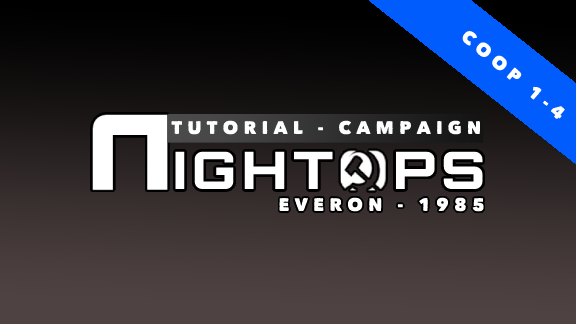
<style>
.page{position:relative;width:576px;height:324px}
.page>*{position:absolute;margin:0}
.t1{font:18.3px "Matiz";letter-spacing:0.28em;color:#ffffff}
.t2{font:51.7px "Orbitron-ExtraBold";letter-spacing:0.11em;color:#ffffff;font-weight:bold}
</style>
<div class="page">
<p class="t1" style="left:462px;top:31px;width:103px;height:89px;rotate:40deg">COOP 1-4</p>
<p class="t1" style="left:171px;top:120px;width:310px;height:15px">TUTORIAL - CAMPAIGN</p>
<p class="t2" style="left:175px;top:151px;width:308px;height:38px">IGHT  PS</p>
<p class="t1" style="left:279px;top:197px;width:205px;height:15px">EVERON - 1985</p>
</div>
